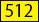
<style>
.page{position:relative;width:39px;height:22px;background:#fff200}
.page>*{position:absolute;margin:0}
.t1{font:18.7px "MyriadPro-Regular";color:#000000}
</style>
<div class="page">
<p class="t1" style="left:5px;top:4px;width:28px;height:13px">512</p>
</div>
